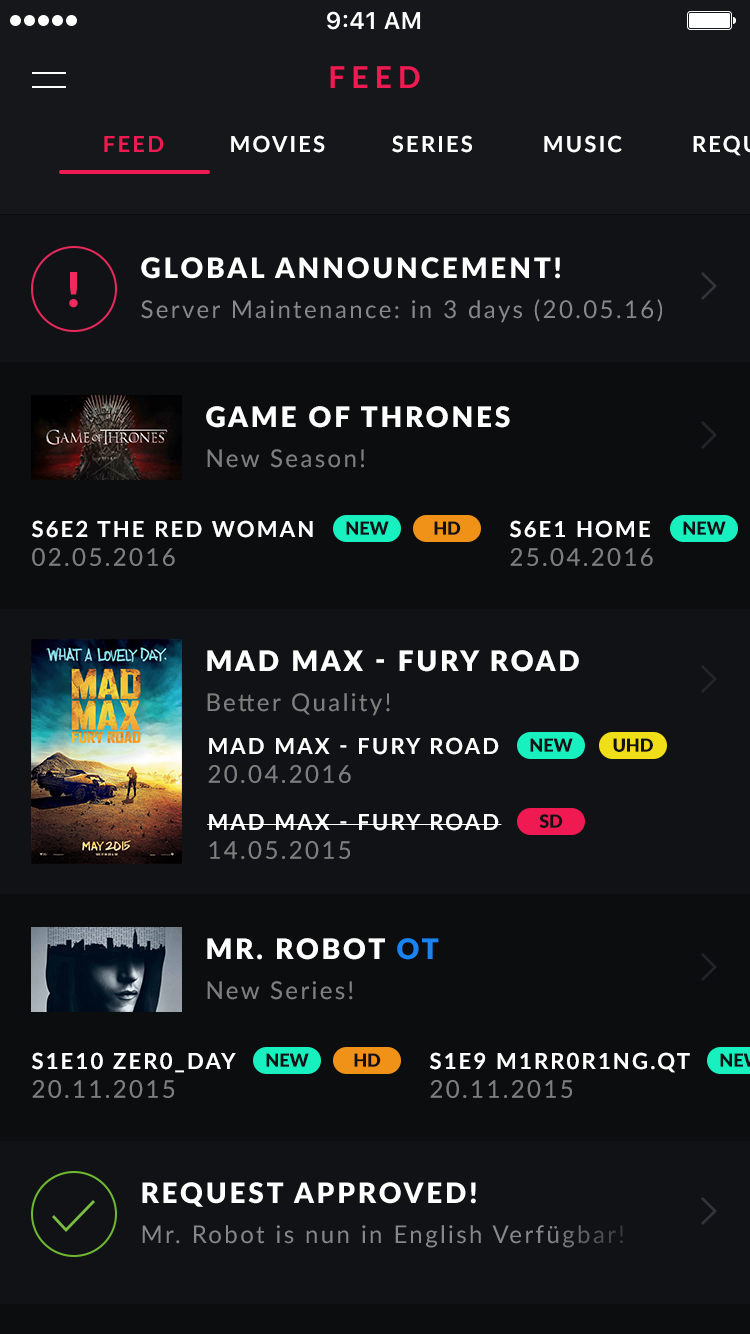
<style>
.page{position:relative;width:750px;height:1334px;background:#111215}
.page>*{position:absolute;margin:0}
.t1{font:30px "Lato-Bold";letter-spacing:0.2em;color:#ef1a51;text-transform:uppercase}
.t2{font:22px "Lato-Bold";letter-spacing:0.1em;color:#ef1a51;text-transform:uppercase}
.t3{font:22px "Lato-Bold";letter-spacing:0.1em;color:#ffffff;text-transform:uppercase}
.t4{font:24px/40px "Lato-Regular";letter-spacing:0.1em;color:#7e7e7e}
.t5{font:28px "Lato-Black";letter-spacing:0.1em;color:#ffffff;text-transform:uppercase}
.t6{font:48px "Lato-Black";color:#ef1a51}
.t7{font:24px "Lato-Regular";letter-spacing:0.1em;color:#7e7e7e}
.t8{font:18px "Lato-Black";color:#111215;text-transform:uppercase}
.t9{font:28px "Lato-Black";letter-spacing:0.1em;color:#1a83ef;text-transform:uppercase}
</style>
<div class="page">
<p class="t1" style="left:330px;top:66px;width:90px;height:22px">FEED</p>
<p class="t2" style="left:104px;top:136px;width:60px;height:16px">FEED</p>
<p class="t3" style="left:231px;top:135px;width:94px;height:18px">MOVIES</p>
<p class="t3" style="left:392px;top:135px;width:80px;height:18px">SERIES</p>
<p class="t3" style="left:544px;top:135px;width:78px;height:18px">MUSIC</p>
<p class="t4" style="left:141px;top:257px;width:521px;height:66px"><span class="t5">GLOBAL announcement!<br></span>Server Maintenance: in 3 days (20.05.16)</p>
<p class="t6" style="left:69px;top:272px;width:9px;height:36px">!</p>
<p class="t5" style="left:206px;top:406px;width:304px;height:62px">Game of Thrones<br><span class="t4">New Season!</span></p>
<p class="t3" style="left:32px;top:520px;width:281px;height:46px">S6E2 The Red Woman<br><span class="t7">02.05.2016</span></p>
<p class="t8" style="left:346px;top:521px;width:43px;height:14px">New</p>
<p class="t8" style="left:434px;top:521px;width:27px;height:14px">HD</p>
<p class="t7" style="left:510px;top:520px;width:143px;height:46px"><span class="t3">S6E1 HOME<br></span>25.04.2016</p>
<p class="t8" style="left:683px;top:521px;width:43px;height:14px">New</p>
<p class="t5" style="left:207px;top:650px;width:372px;height:66px">MAD MAX - Fury Road<br><span class="t4">Better Quality!</span></p>
<p class="t3" style="left:208px;top:737px;width:291px;height:46px">MAD MAX - FURY ROAD<br><span class="t7">20.04.2016</span></p>
<p class="t8" style="left:530px;top:738px;width:43px;height:14px">NEW</p>
<p class="t8" style="left:613px;top:738px;width:40px;height:14px">UHD</p>
<p class="t3" style="left:207px;top:813px;width:295px;height:46px">MAD MAX - FURY ROAD<br><span class="t7">14.05.2015</span></p>
<p class="t8" style="left:539px;top:814px;width:24px;height:14px">SD</p>
<p class="t4" style="left:207px;top:938px;width:232px;height:62px"><span class="t5">Mr. robot </span><span class="t9">OT<br></span>New Series!</p>
<p class="t3" style="left:32px;top:1052px;width:204px;height:46px">S1E10 zer0_day<br><span class="t7">20.11.2015</span></p>
<p class="t8" style="left:266px;top:1053px;width:43px;height:14px">New</p>
<p class="t8" style="left:354px;top:1053px;width:27px;height:14px">HD</p>
<p class="t3" style="left:430px;top:1052px;width:260px;height:46px">S1E9 m1rr0r1ng.qt<br><span class="t7">20.11.2015</span></p>
<p class="t4" style="left:142px;top:1182px;width:481px;height:66px"><span class="t5">REQUEST APPROVED!<br></span>Mr. Robot is nun in English Verfügbar!</p>
</div>
